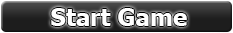
<style>
.page{position:relative;width:233px;height:33px}
.page>*{position:absolute;margin:0}
.t1{font:24px "Tahoma-Bold";color:#ffffff}
</style>
<div class="page">
<p class="t1" style="left:51px;top:8px;width:136px;height:18px">Start Game</p>
</div>
